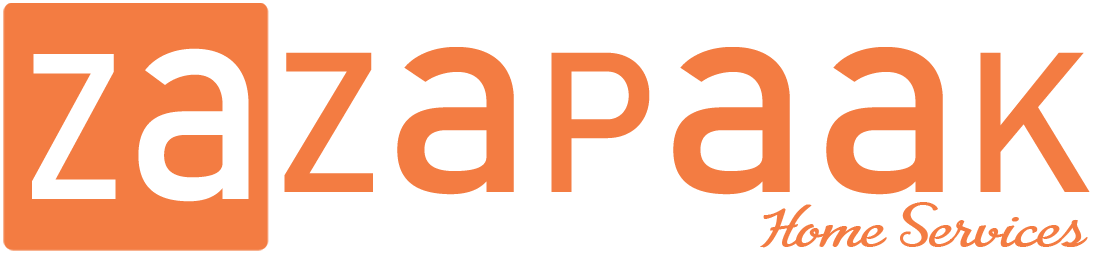
<style>
.page{position:relative;width:1103px;height:254px;background:#ffffff}
.page>*{position:absolute;margin:0}
.t1{font:203.6px "Bahnschrift";color:#ffffff;scale:0.93 1}
.t2{font:292.3px "Bahnschrift";color:#ffffff;scale:0.93 1}
.t3{font:281.7px "Bahnschrift";color:#f37c42}
.t4{font:196.1px "Bahnschrift";color:#f37c42}
.t5{font:49.8px "AdvertisingScript";color:#f37c42;scale:1.29 1}
</style>
<div class="page">
<p class="t1" style="left:32px;top:48px;width:217px;height:154px">Z<span class="t2">a</span></p>
<p class="t3" style="left:284px;top:47px;width:806px;height:148px"><span class="t4">Z</span>a<span class="t4">P</span>aa<span class="t4">K</span></p>
<p class="t5" style="left:760px;top:202px;width:328px;height:46px">Home Services</p>
</div>
